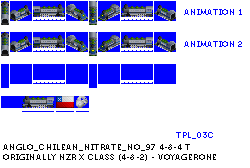
<style>
.page{position:relative;width:250px;height:168px;background:#ffffff}
.page>*{position:absolute;margin:0}
.t1{font:8px "Museo700-Regular";letter-spacing:0.075em;color:#0000ff;text-transform:uppercase}
.t2{font:8px "Museo700-Regular";letter-spacing:0.075em;color:#000000;text-transform:uppercase}
</style>
<div class="page">
<p class="t1" style="left:184px;top:9px;width:58px;height:6px">Animation 1</p>
<p class="t1" style="left:184px;top:41px;width:58px;height:6px">Animation 2</p>
<p class="t1" style="left:176px;top:132px;width:37px;height:7px">tpl_03c</p>
<p class="t2" style="left:3px;top:144px;width:213px;height:17px">Anglo_Chilean_Nitrate_No_97 4-8-4 t<br>originally nzr x class (4-8-2) - voyagerone</p>
</div>
